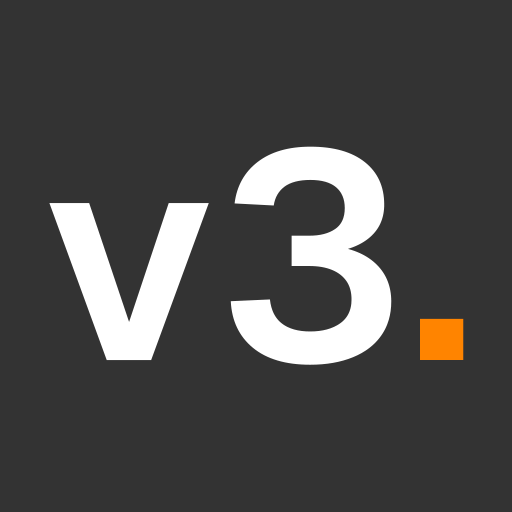
<style>
.page{position:relative;width:512px;height:512px;background:#333333}
.page>*{position:absolute;margin:0}
.t1{font:293.8px "Geist-SemiBold";letter-spacing:0.01em;color:#ffffff}
.t2{font:293.8px "Geist-SemiBold";letter-spacing:0.01em;color:#ff8400}
</style>
<div class="page">
<p class="t1" style="left:49px;top:146px;width:415px;height:219px">v3<span class="t2">.</span></p>
</div>
